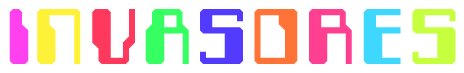
<style>
.page{position:relative;width:464px;height:73px;background:#ffffff}
.page>*{position:absolute;margin:0}
.t1{font:92px "Computerfont";letter-spacing:0.035em;color:#ff40ef}
.t2{font:92px "Computerfont";letter-spacing:0.035em;color:#fef238}
.t3{font:92px "Computerfont";letter-spacing:0.035em;color:#ff385d}
.t4{font:92px "Computerfont";letter-spacing:0.035em;color:#36ff61}
.t5{font:92px "Computerfont";letter-spacing:0.035em;color:#523bff}
.t6{font:92px "Computerfont";letter-spacing:0.035em;color:#ff7336}
.t7{font:92px "Computerfont";letter-spacing:0.035em;color:#ff3f90}
.t8{font:92px "Computerfont";letter-spacing:0.035em;color:#3ed8ff}
.t9{font:92px "Computerfont";letter-spacing:0.035em;color:#c6ff3d}
</style>
<div class="page">
<p class="t1" style="left:9px;top:9px;width:447px;height:55px">I<span class="t2">N</span><span class="t3">V</span><span class="t4">A</span><span class="t5">S</span><span class="t6">O</span><span class="t7">R</span><span class="t8">E</span><span class="t9">S</span></p>
</div>
